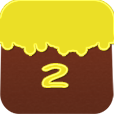
<style>
.page{position:relative;width:114px;height:114px;background:#ebdf26}
.page>*{position:absolute;margin:0}
.t1{font:30.6px "ComicSansMS-Bold";scale:1.67 1}
</style>
<div class="page">
<p class="t1" style="left:42px;top:64px;width:26px;height:23px">2</p>
</div>
